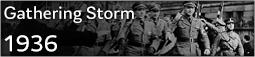
<style>
.page{position:relative;width:255px;height:57px}
.page>*{position:absolute;margin:0}
.t1{font:18px "LacaText-Regular";color:#ffffff}
.t2{font:24px "LacaText-Regular";color:#ffffff}
</style>
<div class="page">
<p class="t1" style="left:4px;top:6px;width:130px;height:17px">Gathering Storm</p>
<p class="t2" style="left:4px;top:35px;width:53px;height:17px">1936</p>
</div>
